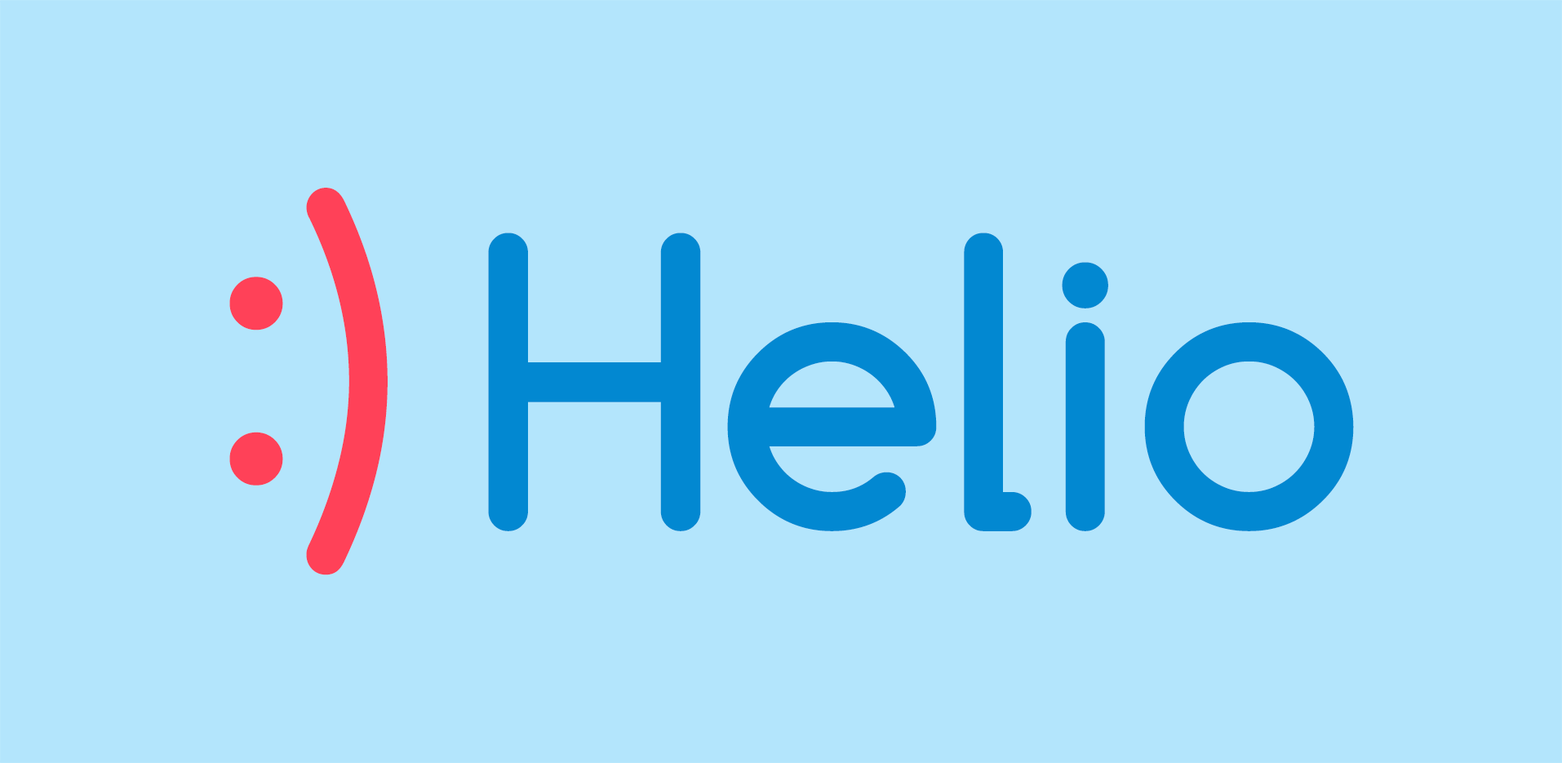
<style>
.page{position:relative;width:1562px;height:763px;background:#b3e5fc}
.page>*{position:absolute;margin:0}
.t1{font:381.6px "Comfortaa-Bold";color:#ff4158}
.t2{font:381.6px "Comfortaa-Bold";color:#0288d1}
</style>
<div class="page">
<p class="t1" style="left:229px;top:188px;width:159px;height:387px">:)</p>
<p class="t2" style="left:488px;top:233px;width:866px;height:298px">Helio</p>
</div>
